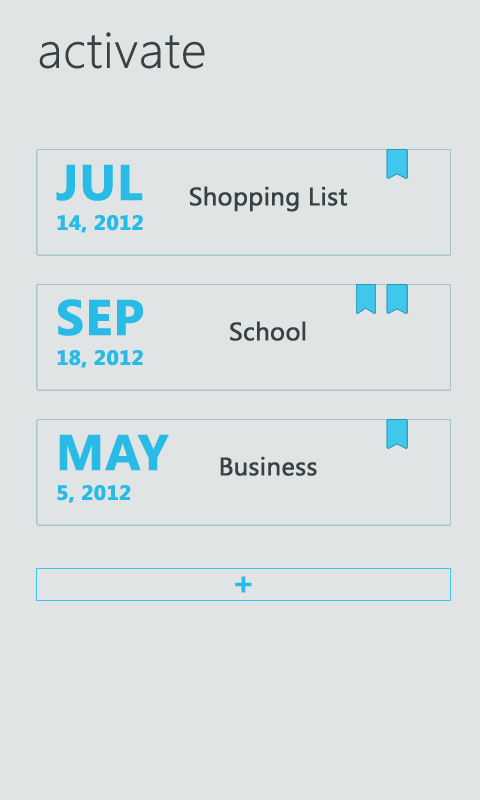
<style>
.page{position:relative;width:480px;height:800px;background:#e1e4e4}
.page>*{position:absolute;margin:0}
.t1{font:50px "SegoeUI-Light";color:#374343;font-weight:bold}
.t2{font:50px "SegoeUI-Bold";color:#27bbe6;font-weight:bold}
.t3{font:25px "SegoeUI";color:#374343;font-weight:bold}
.t4{font:20.8px "SegoeUI-Bold";color:#27bbe6;font-weight:bold}
.t5{font:33.3px "SegoeUI-Bold";color:#27bbe6;font-weight:bold}
</style>
<div class="page">
<p class="t1" style="left:39px;top:32px;width:166px;height:37px">activate</p>
<p class="t2" style="left:56px;top:164px;width:87px;height:37px">JUL</p>
<p class="t3" style="left:190px;top:186px;width:157px;height:26px">Shopping List</p>
<p class="t4" style="left:57px;top:215px;width:86px;height:18px">14, 2012</p>
<p class="t2" style="left:58px;top:299px;width:86px;height:37px">SEP</p>
<p class="t3" style="left:230px;top:321px;width:76px;height:20px">School</p>
<p class="t4" style="left:57px;top:350px;width:86px;height:18px">18, 2012</p>
<p class="t2" style="left:59px;top:434px;width:110px;height:37px">MAY</p>
<p class="t3" style="left:220px;top:456px;width:97px;height:20px">Business</p>
<p class="t4" style="left:57px;top:485px;width:74px;height:18px">5, 2012</p>
<p class="t5" style="left:235px;top:576px;width:17px;height:17px">+</p>
</div>
